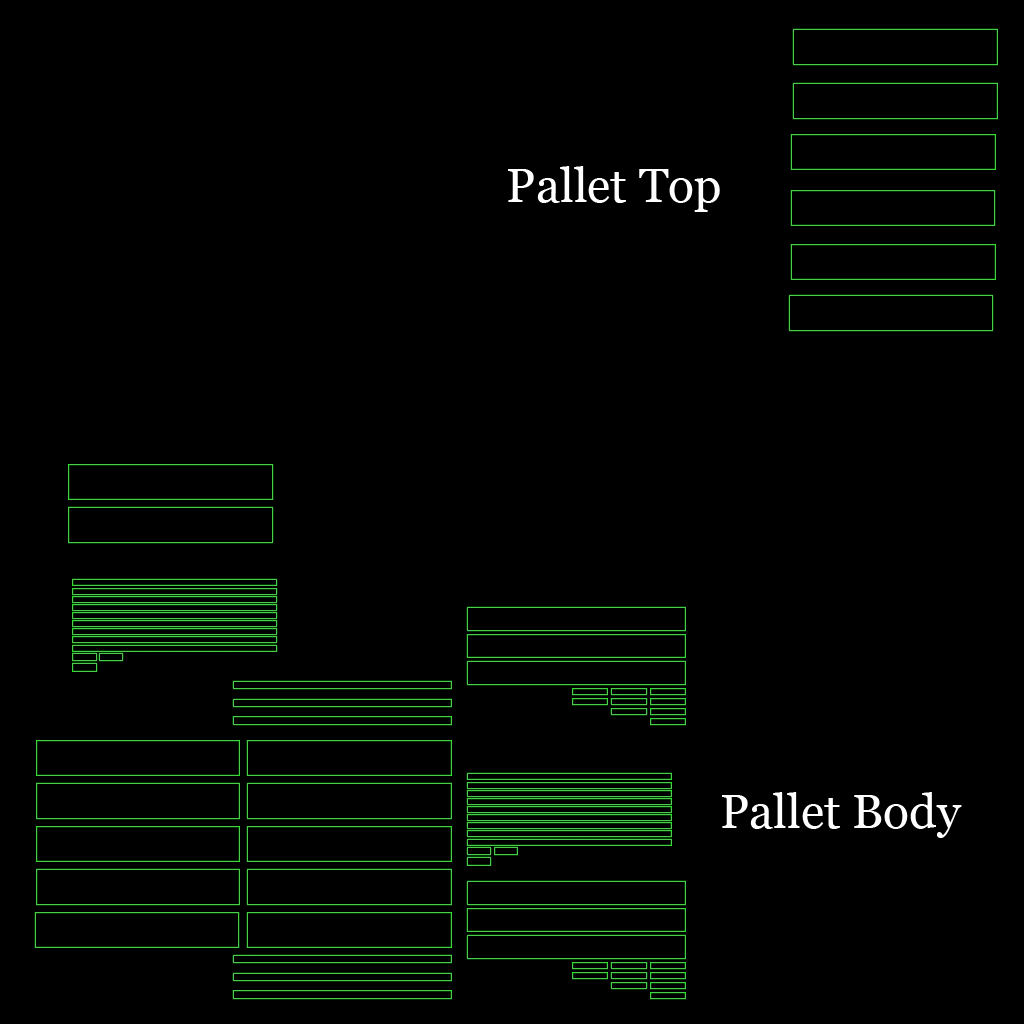
<style>
.page{position:relative;width:1024px;height:1024px;background:#000000}
.page>*{position:absolute;margin:0}
.t1{font:48px "Georgia";color:#ffffff}
</style>
<div class="page">
<p class="t1" style="left:508px;top:166px;width:212px;height:46px">Pallet Top</p>
<p class="t1" style="left:722px;top:792px;width:240px;height:46px">Pallet Body</p>
</div>
